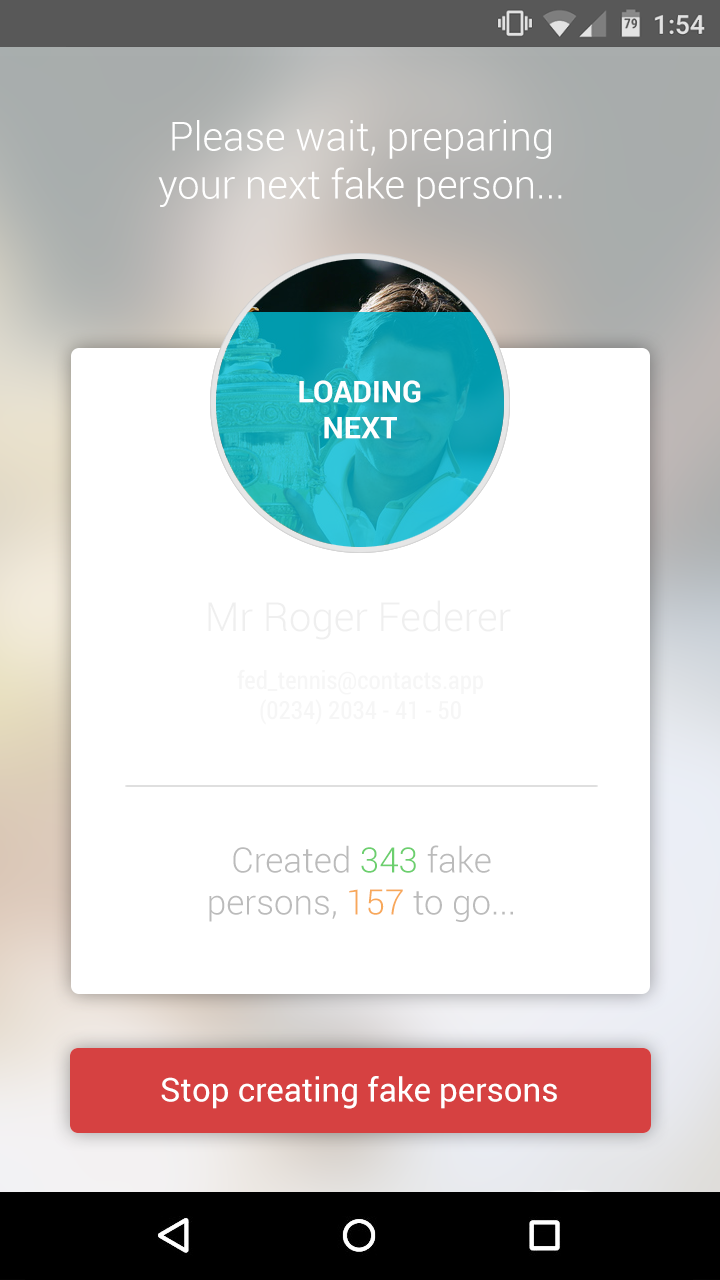
<style>
.page{position:relative;width:720px;height:1280px;background:#ffffff}
.page>*{position:absolute;margin:0}
.t1{font:40px "Roboto-Light";color:#ffffff}
.t2{font:30px "Roboto-Bold";color:#feffff}
.t3{font:40px "Roboto-Light";color:#efefef}
.t4{font:25px "RobotoCondensed-Regular";color:#f6f6f6}
.t5{font:35px "Roboto-Light";color:#bbbbbb}
.t6{font:35px "Roboto-Light";color:#6ccf6e}
.t7{font:35px "Roboto-Light";color:#f7a85a}
.t8{font:33px "Roboto-Regular";color:#ffffff}
</style>
<div class="page">
<p class="t1" style="left:158px;top:120px;width:404px;height:87px;text-align:center">Please wait, preparing <br>your next fake person...</p>
<p class="t2" style="left:299px;top:380px;width:122px;height:59px;text-align:center">LOADING<br>NEXT</p>
<p class="t3" style="left:208px;top:600px;width:303px;height:40px">Mr Roger Federer</p>
<p class="t4" style="left:237px;top:669px;width:246px;height:56px;text-align:center">fed_tennis@contacts.app<br>(0234) 2034 - 41 - 50</p>
<p class="t5" style="left:209px;top:845px;width:304px;height:77px;text-align:center">Created <span class="t6">343 </span>fake <br>persons, <span class="t7">157 </span>to go...</p>
<p class="t8" style="left:161px;top:1076px;width:396px;height:33px">Stop creating fake persons</p>
</div>
